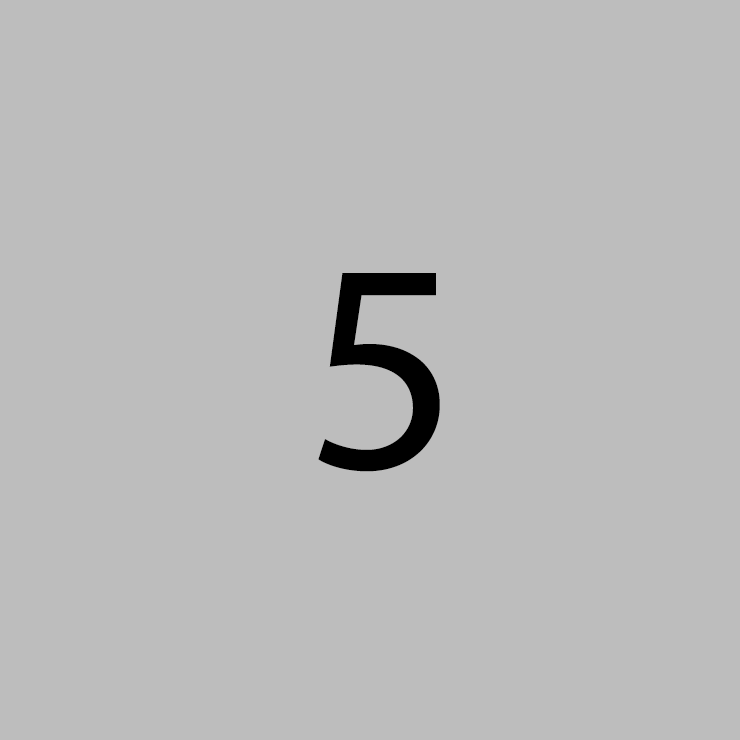
<style>
.page{position:relative;width:740px;height:740px;background:#bdbdbd}
.page>*{position:absolute;margin:0}
.t1{font:300px "MyriadPro-Regular";color:#000000}
</style>
<div class="page">
<p class="t1" style="left:318px;top:273px;width:122px;height:199px">5</p>
</div>
